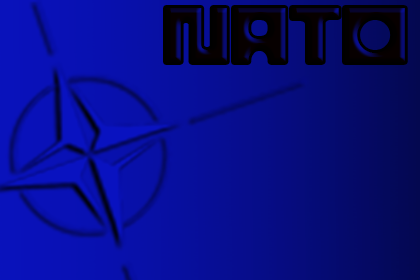
<style>
.page{position:relative;width:420px;height:280px}
.page>*{position:absolute;margin:0}
.t1{font:48px "DSProgress-SemiBold";letter-spacing:0.1em}
</style>
<div class="page">
<p class="t1" style="left:166px;top:8px;width:239px;height:54px">nato</p>
</div>
